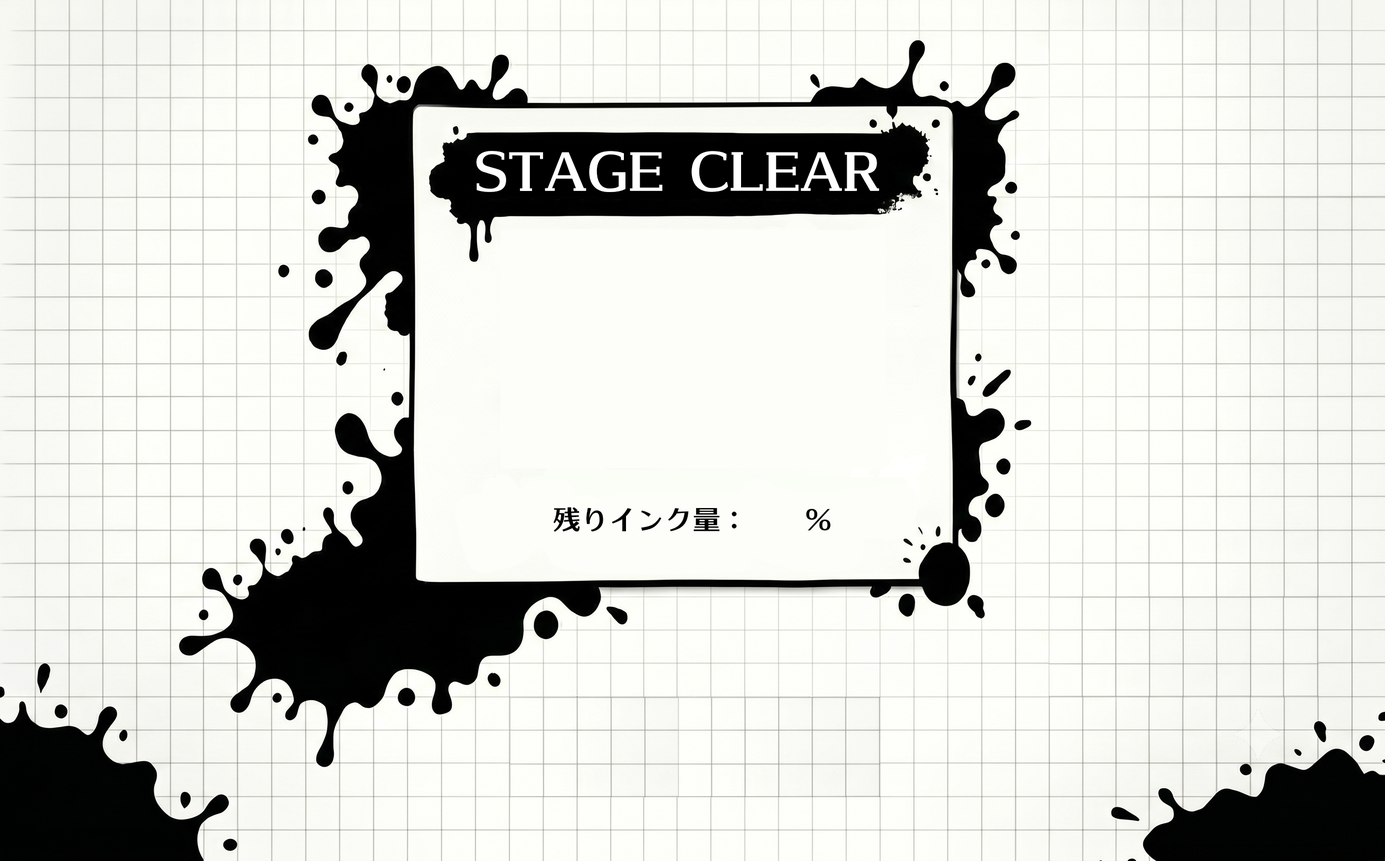
<style>
.page{position:relative;width:1385px;height:861px}
.page>*{position:absolute;margin:0}
.t1{font:50.7px "SicPrintempsPetitE";color:#ffffff}
.t2{font:28px "SicPrintempsPetitE";color:#000000}
</style>
<div class="page">
<p class="t1" style="left:476px;top:151px;width:403px;height:41px">STAGE CLEAR !</p>
<p class="t2" style="left:553px;top:507px;width:278px;height:25px">残りインク量：　　％</p>
</div>
